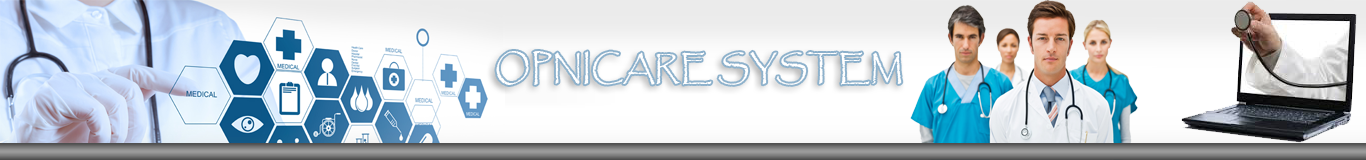
<style>
.page{position:relative;width:1366px;height:160px}
.page>*{position:absolute;margin:0}
.t1{font:33.6px "Papyrus-Regular";color:#ffffff;scale:0.96 1}
</style>
<div class="page">
<p class="t1" style="left:496px;top:51px;width:406px;height:34px">OPNICARE SYSTEM</p>
</div>
